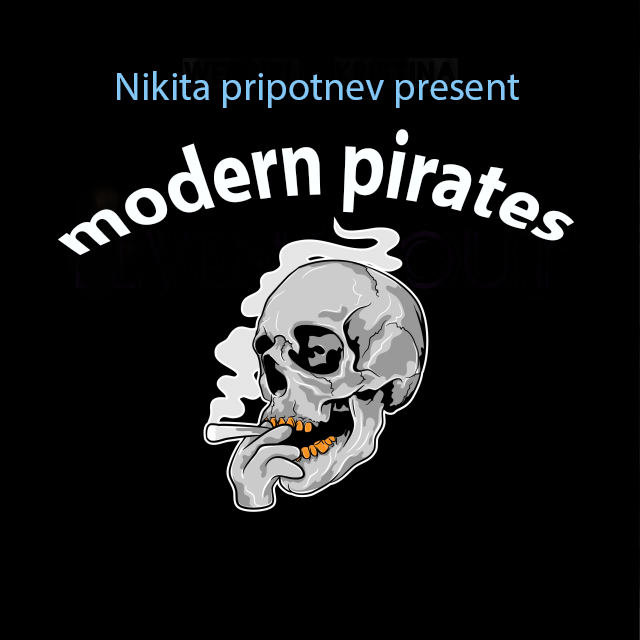
<style>
.page{position:relative;width:640px;height:640px;background:#000000}
.page>*{position:absolute;margin:0}
.t1{font:40px "MyriadPro-Regular";color:#83c7f7}
.t2{font:48px "MyriadPro-Bold";color:#fcffff}
</style>
<div class="page">
<p class="t1" style="left:117px;top:71px;width:402px;height:37px">Nikita pripotnev present</p>
<p class="t2" style="left:58px;top:129px;width:516px;height:126px">modern pirates</p>
</div>
